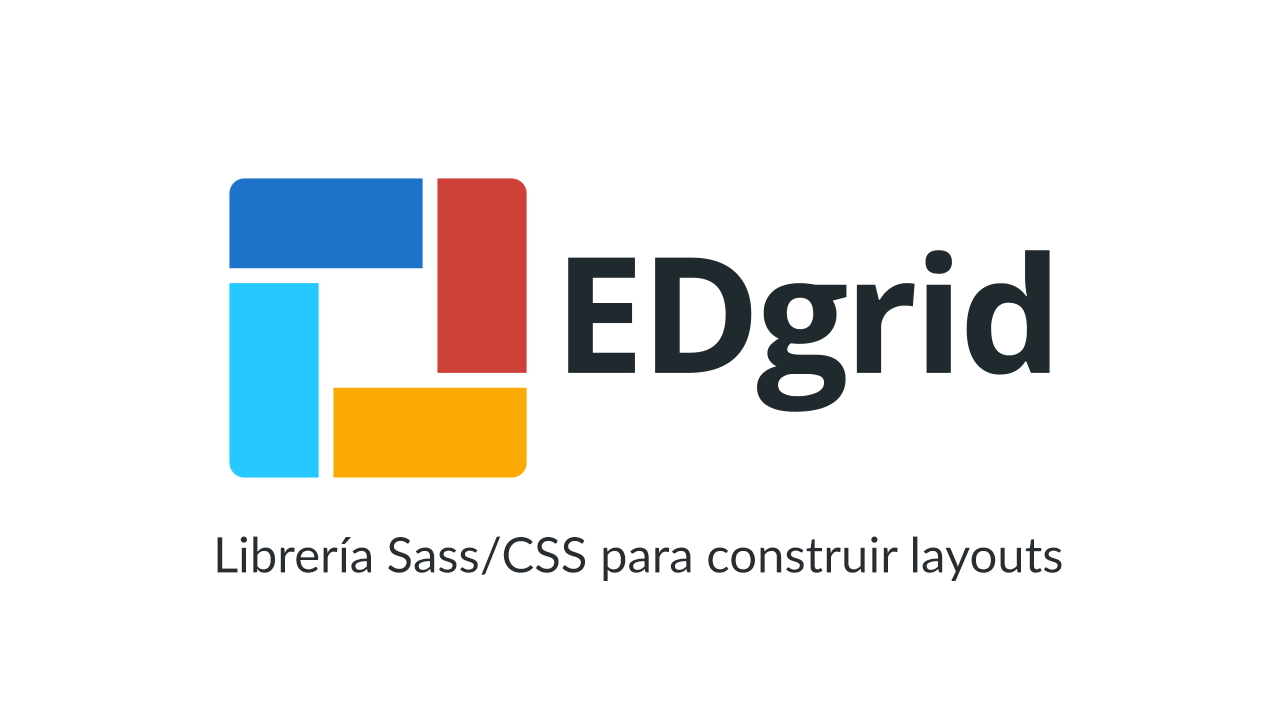
<style>
.page{position:relative;width:1280px;height:720px;background:#ffffff}
.page>*{position:absolute;margin:0}
.t1{font:49px "Lato-Regular";color:#282d31}
</style>
<div class="page">
<p class="t1" style="left:217px;top:536px;width:845px;height:45px">Librería Sass/CSS para construir layouts</p>
</div>
